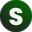
<style>
.page{position:relative;width:32px;height:32px}
.page>*{position:absolute;margin:0}
.t1{font:24px "Poppins-ExtraBold";color:#f3f0f0}
</style>
<div class="page">
<p class="t1" style="left:9px;top:7px;width:14px;height:19px">S</p>
</div>
